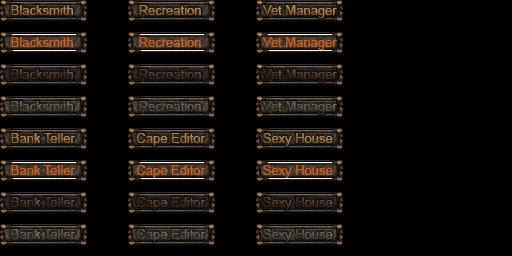
<style>
.page{position:relative;width:512px;height:256px;background:#000000}
.page>*{position:absolute;margin:0}
.t1{font:13px "ArialMT"}
.t2{font:13px "ArialMT";color:#d75b0f}
.t3{font:13px "ArialMT";color:#4b2b1e}
.t4{font:13px "ArialMT";color:#605a52}
.t5{font:13px "ArialMT";color:#fca533}
.t6{font:13px "ArialMT";color:#4b2c1f}
</style>
<div class="page">
<p class="t1" style="left:11px;top:5px;width:326px;height:13px">Blacksmith                  Recreation                 Vet Manager</p>
<p class="t2" style="left:11px;top:37px;width:326px;height:13px">Blacksmith                  Recreation                 Vet Manager</p>
<p class="t3" style="left:11px;top:69px;width:326px;height:13px">Blacksmith                  Recreation                 Vet Manager</p>
<p class="t4" style="left:11px;top:101px;width:326px;height:13px;opacity:0.53"><span class="t5"> </span>Blacksmith                  Recreation                 Vet Manager</p>
<p class="t1" style="left:11px;top:133px;width:322px;height:13px">Bank Teller                 Cape Editor                Sexy House</p>
<p class="t2" style="left:11px;top:165px;width:322px;height:13px">Bank Teller                 Cape Editor                Sexy House</p>
<p class="t6" style="left:11px;top:197px;width:322px;height:13px">Bank Teller                 Cape Editor                Sexy House</p>
<p class="t4" style="left:11px;top:229px;width:322px;height:13px;opacity:0.53"><span class="t5"> </span>Bank Teller                 Cape Editor                Sexy House</p>
</div>
